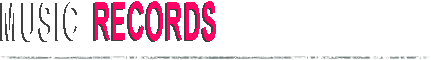
<style>
.page{position:relative;width:431px;height:60px;background:#ffffff}
.page>*{position:absolute;margin:0}
.t1{font:53.2px "Arial-BoldMT";letter-spacing:0.05em;color:#ffffff;scale:0.44 1}
.t2{font:53.2px "Arial-BoldMT";letter-spacing:0.05em;color:#ff0365;scale:0.44 1}
</style>
<div class="page">
<p class="t1" style="left:2px;top:1px;width:78px;height:40px">MUSIC</p>
<p class="t2" style="left:95px;top:1px;width:121px;height:40px">RECORDS</p>
</div>
